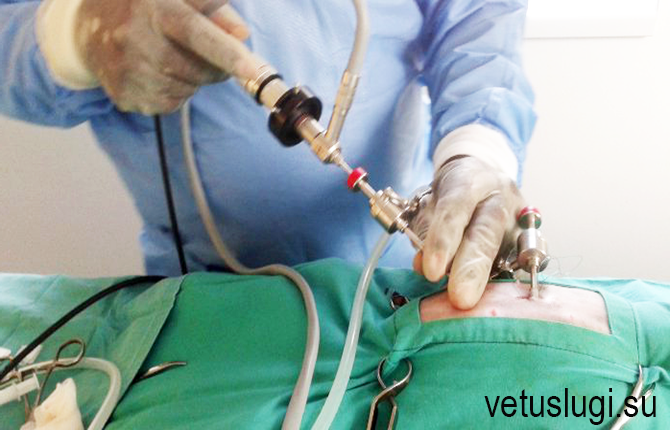
<style>
.page{position:relative;width:670px;height:430px}
.page>*{position:absolute;margin:0}
.t1{font:40px "ArialNarrow";letter-spacing:0.002em;color:#060606}
</style>
<div class="page">
<p class="t1" style="left:484px;top:388px;width:172px;height:37px">vetuslugi.su</p>
</div>
